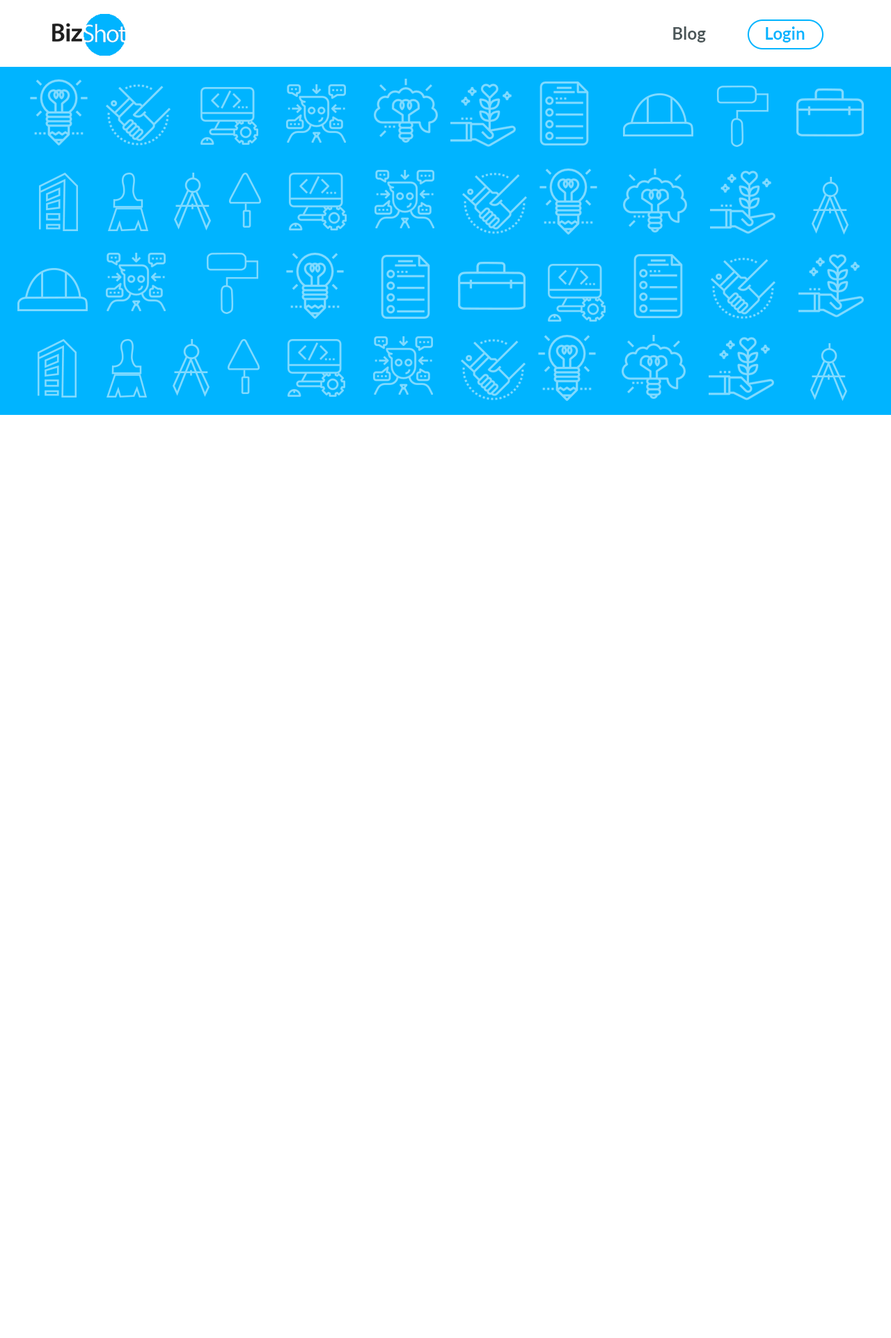
<style>
.page{position:relative;width:891px;height:1338px;background:#ffffff}
.page>*{position:absolute;margin:0}
.t1{font:16.7px "Lato-Bold";color:#4b5658}
.t2{font:16.7px "Lato-Bold";color:#00b4ff}
</style>
<div class="page">
<p class="t1" style="left:673px;top:26px;width:33px;height:16px">Blog</p>
<p class="t2" style="left:766px;top:26px;width:39px;height:16px">Login</p>
</div>
